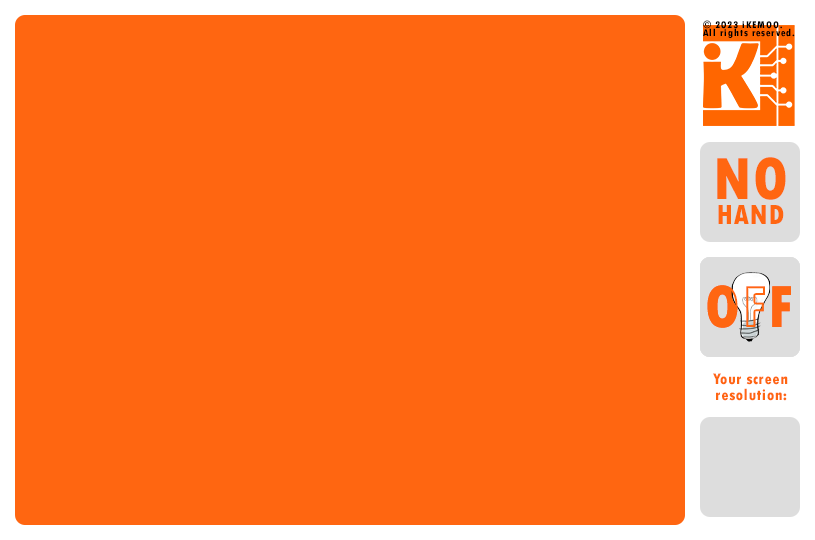
<style>
.page{position:relative;width:815px;height:540px;background:#ff6611}
.page>*{position:absolute;margin:0}
.t1{font:10.4px/8.3px "TwCenMT-CondensedExtraBold";letter-spacing:0.085em;color:#000000}
.t2{font:29.2px/25px "TwCenMT-CondensedExtraBold";letter-spacing:0.025em;color:#ff6611;text-transform:uppercase}
.t3{font:62.5px/25px "TwCenMT-CondensedExtraBold";letter-spacing:0.025em;color:#ff6611;text-transform:uppercase}
.t4{font:62.5px "TwCenMT-CondensedExtraBold";letter-spacing:0.025em;color:#ff6611;text-transform:uppercase}
.t5{font:16.3px/16.3px "TwCenMT-CondensedExtraBold";letter-spacing:0.025em;color:#ff6611}
</style>
<div class="page">
<p class="t1" style="left:703px;top:20px;width:92px;height:18px">© 2023 iKEMOO.  <br>All rights reserved.</p>
<p class="t2" style="left:717px;top:157px;width:69px;height:67px;text-align:center"><span class="t3">No<br></span>Hand</p>
<p class="t4" style="left:707px;top:285px;width:84px;height:43px">OFF</p>
<p class="t4" style="left:707px;top:285px;width:84px;height:43px">OFF</p>
<p class="t4" style="left:713px;top:285px;width:70px;height:43px">ON</p>
<p class="t4" style="left:713px;top:285px;width:70px;height:43px">ON</p>
<p class="t5" style="left:713px;top:373px;width:75px;height:28px;text-align:center">Your screen resolution:</p>
</div>
